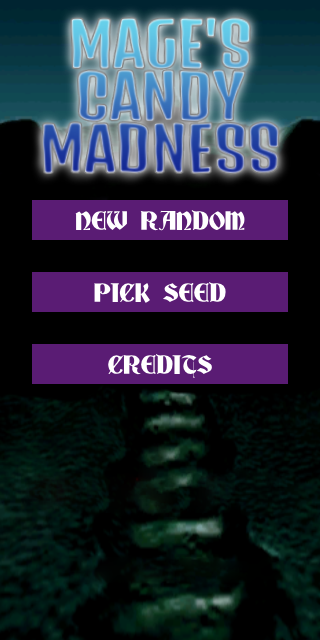
<style>
.page{position:relative;width:320px;height:640px;background:#000000}
.page>*{position:absolute;margin:0}
.t1{font:24px "Deutsch-Gothic";color:#ffffff}
</style>
<div class="page">
<p class="t1" style="left:75px;top:210px;width:170px;height:21px">NEW RANDOM</p>
<p class="t1" style="left:94px;top:282px;width:132px;height:21px">PICK SEED</p>
<p class="t1" style="left:108px;top:354px;width:104px;height:24px">CREDITS</p>
</div>
